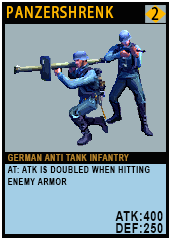
<style>
.page{position:relative;width:170px;height:241px;background:#a0b2b8}
.page>*{position:absolute;margin:0}
.t1{font:15.1px "AdobeHeitiStd-Regular";letter-spacing:0.08em;color:#ffb800;text-transform:uppercase;scale:0.86 1}
.t2{font:16.2px "AdobeHeitiStd-Regular";letter-spacing:0.08em;color:#000000;text-transform:uppercase;scale:0.86 1}
.t3{font:9.3px/12px "Arial-BoldMT";letter-spacing:0.08em;color:#020100;text-transform:uppercase;scale:0.76 1}
.t4{font:9.3px/20.2px "Arial-BoldMT";letter-spacing:0.08em;color:#b4832c;text-transform:uppercase;scale:0.76 1}
.t5{font:13.9px/12px "Arial-BoldMT";letter-spacing:0.08em;color:#050606;text-transform:uppercase;scale:0.76 1}
</style>
<div class="page">
<p class="t1" style="left:7px;top:6px;width:107px;height:12px">Panzershrenk</p>
<p class="t2" style="left:151px;top:7px;width:8px;height:13px">2</p>
<p class="t3" style="left:7px;top:154px;width:156px;height:79px"><span class="t4">German Anti Tank Infantry<br></span>AT: Atk is doubled when hitting enemy armor<br><br><br><span class="t5">atk:400<br>def:250</span></p>
</div>
